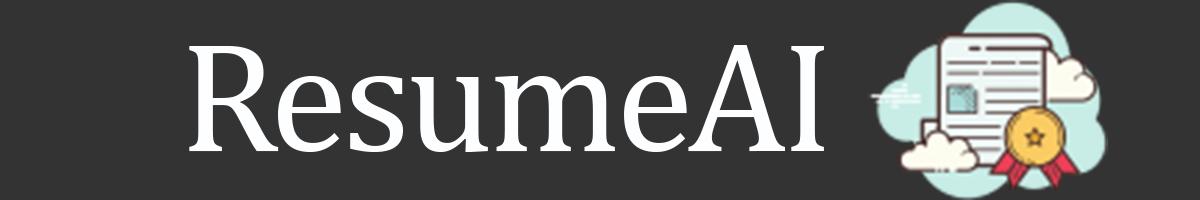
<style>
.page{position:relative;width:1200px;height:200px;background:#333333}
.page>*{position:absolute;margin:0}
.t1{font:158.3px "CambriaMath";letter-spacing:-0.03em;color:#fdfeff}
</style>
<div class="page">
<p class="t1" style="left:189px;top:45px;width:635px;height:107px">ResumeAI</p>
</div>
